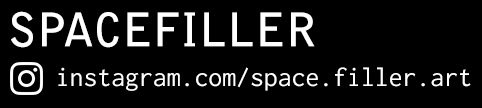
<style>
.page{position:relative;width:482px;height:108px;background:#000000}
.page>*{position:absolute;margin:0}
.t1{font:46px "BellGothicStd-Bold";color:#ffffff}
.t2{font:27.7px "Inconsolata";color:#ffffff}
</style>
<div class="page">
<p class="t1" style="left:11px;top:11px;width:304px;height:37px">SPACEFILLER</p>
<p class="t2" style="left:58px;top:67px;width:413px;height:24px">instagram.com/space.filler.art</p>
</div>
